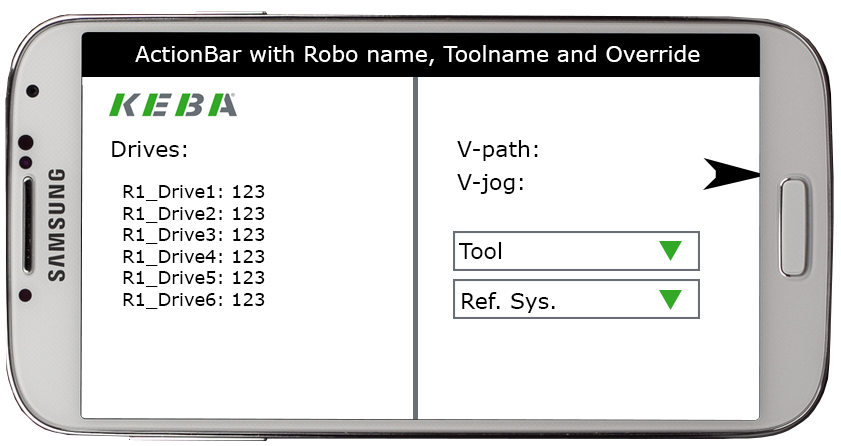
<style>
.page{position:relative;width:841px;height:446px;background:#ffffff}
.page>*{position:absolute;margin:0}
.t1{font:22px "Verdana";color:#ffffff}
.t2{font:22px "Verdana";color:#000000}
.t3{font:18px "Verdana";color:#000000}
</style>
<div class="page">
<p class="t1" style="left:135px;top:45px;width:565px;height:21px">ActionBar with Robo name, Toolname and Override</p>
<p class="t2" style="left:112px;top:141px;width:75px;height:16px">Drives:</p>
<p class="t2" style="left:457px;top:140px;width:81px;height:21px">V-path:</p>
<p class="t2" style="left:457px;top:174px;width:66px;height:20px">V-jog:</p>
<p class="t3" style="left:123px;top:185px;width:142px;height:124px">R1_Drive1: 123<br>R1_Drive2: 123<br>R1_Drive3: 123<br>R1_Drive4: 123<br>R1_Drive5: 123<br>R1_Drive6: 123</p>
<p class="t2" style="left:458px;top:242px;width:44px;height:17px">Tool</p>
<p class="t2" style="left:462px;top:292px;width:93px;height:21px">Ref. Sys.</p>
</div>
